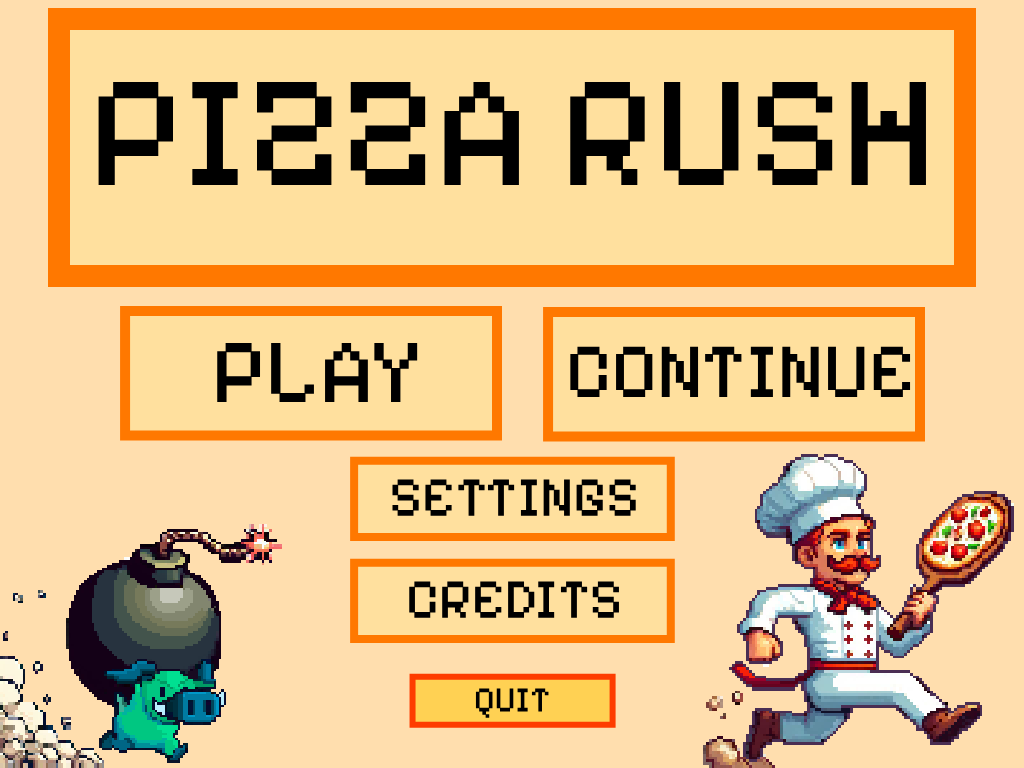
<style>
.page{position:relative;width:1024px;height:768px;background:#ffe09e}
.page>*{position:absolute;margin:0}
.t1{font:160px "PixelifySans-Regular";color:#000000}
.t2{font:92px "PixelifySans-Regular";color:#000000}
.t3{font:78px "PixelifySans-Regular";color:#000000}
.t4{font:56.2px "PixelifySans-Regular";color:#000000}
.t5{font:35.5px "PixelifySans-Regular";color:#000000}
</style>
<div class="page">
<p class="t1" style="left:98px;top:82px;width:828px;height:103px">PIZZA RUSH</p>
<p class="t2" style="left:217px;top:343px;width:201px;height:59px">PLAY</p>
<p class="t3" style="left:570px;top:346px;width:341px;height:51px">CONTINUE</p>
<p class="t4" style="left:392px;top:479px;width:244px;height:37px">SETTINGS</p>
<p class="t4" style="left:409px;top:581px;width:210px;height:37px">CREDITS</p>
<p class="t5" style="left:475px;top:688px;width:74px;height:30px">QUIT</p>
</div>
